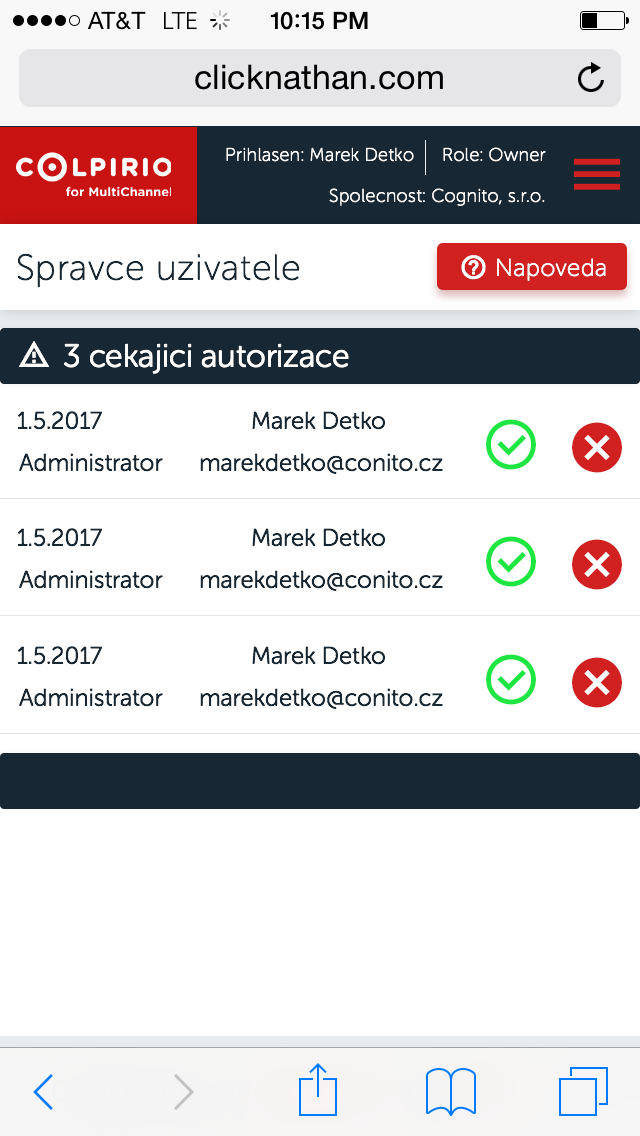
<style>
.page{position:relative;width:640px;height:1136px;background:#ffffff}
.page>*{position:absolute;margin:0}
.t1{font:18px "MuseoSansRounded-100";letter-spacing:0.025em;color:#ffffff}
.t2{font:36px "MuseoSansRounded-100";letter-spacing:0.025em;color:#172734}
.t3{font:24px "MuseoSansRounded-100";letter-spacing:0.025em;color:#ffffff}
.t4{font:32px "MuseoSansRounded-300";color:#ffffff}
.t5{font:24px "MuseoSansRounded-300";color:#172734}
</style>
<div class="page">
<p class="t1" style="left:226px;top:147px;width:188px;height:15px">Prihlasen: Marek Detko</p>
<p class="t1" style="left:443px;top:147px;width:103px;height:15px">Role: Owner</p>
<p class="t1" style="left:329px;top:188px;width:216px;height:18px">Spolecnost: Cognito, s.r.o.</p>
<p class="t2" style="left:17px;top:253px;width:283px;height:35px">Spravce uzivatele</p>
<p class="t3" style="left:497px;top:258px;width:109px;height:23px">Napoveda</p>
<p class="t4" style="left:64px;top:343px;width:285px;height:31px">3 cekajici autorizace</p>
<p class="t5" style="left:17px;top:411px;width:85px;height:19px">1.5.2017</p>
<p class="t5" style="left:252px;top:411px;width:134px;height:19px">Marek Detko</p>
<p class="t5" style="left:19px;top:453px;width:144px;height:19px">Administrator</p>
<p class="t5" style="left:200px;top:453px;width:243px;height:21px">marekdetko@conito.cz</p>
<p class="t5" style="left:17px;top:528px;width:85px;height:19px">1.5.2017</p>
<p class="t5" style="left:252px;top:528px;width:134px;height:19px">Marek Detko</p>
<p class="t5" style="left:19px;top:570px;width:144px;height:19px">Administrator</p>
<p class="t5" style="left:200px;top:570px;width:243px;height:21px">marekdetko@conito.cz</p>
<p class="t5" style="left:17px;top:646px;width:85px;height:19px">1.5.2017</p>
<p class="t5" style="left:252px;top:646px;width:134px;height:19px">Marek Detko</p>
<p class="t5" style="left:19px;top:688px;width:144px;height:19px">Administrator</p>
<p class="t5" style="left:200px;top:688px;width:243px;height:21px">marekdetko@conito.cz</p>
</div>
